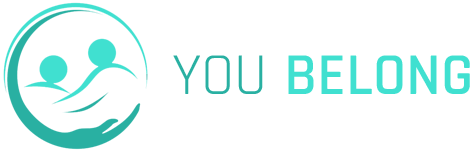
<style>
.page{position:relative;width:474px;height:151px;background:#ffffff}
.page>*{position:absolute;margin:0}
.t1{font:60px "Rajdhani-SemiBold";color:#40e0d0}
.t2{font:60px "Rajdhani-Regular";color:#29b0a2}
</style>
<div class="page">
<p class="t1" style="left:173px;top:55px;width:297px;height:39px"><span class="t2">YOU </span>BELONG</p>
</div>
